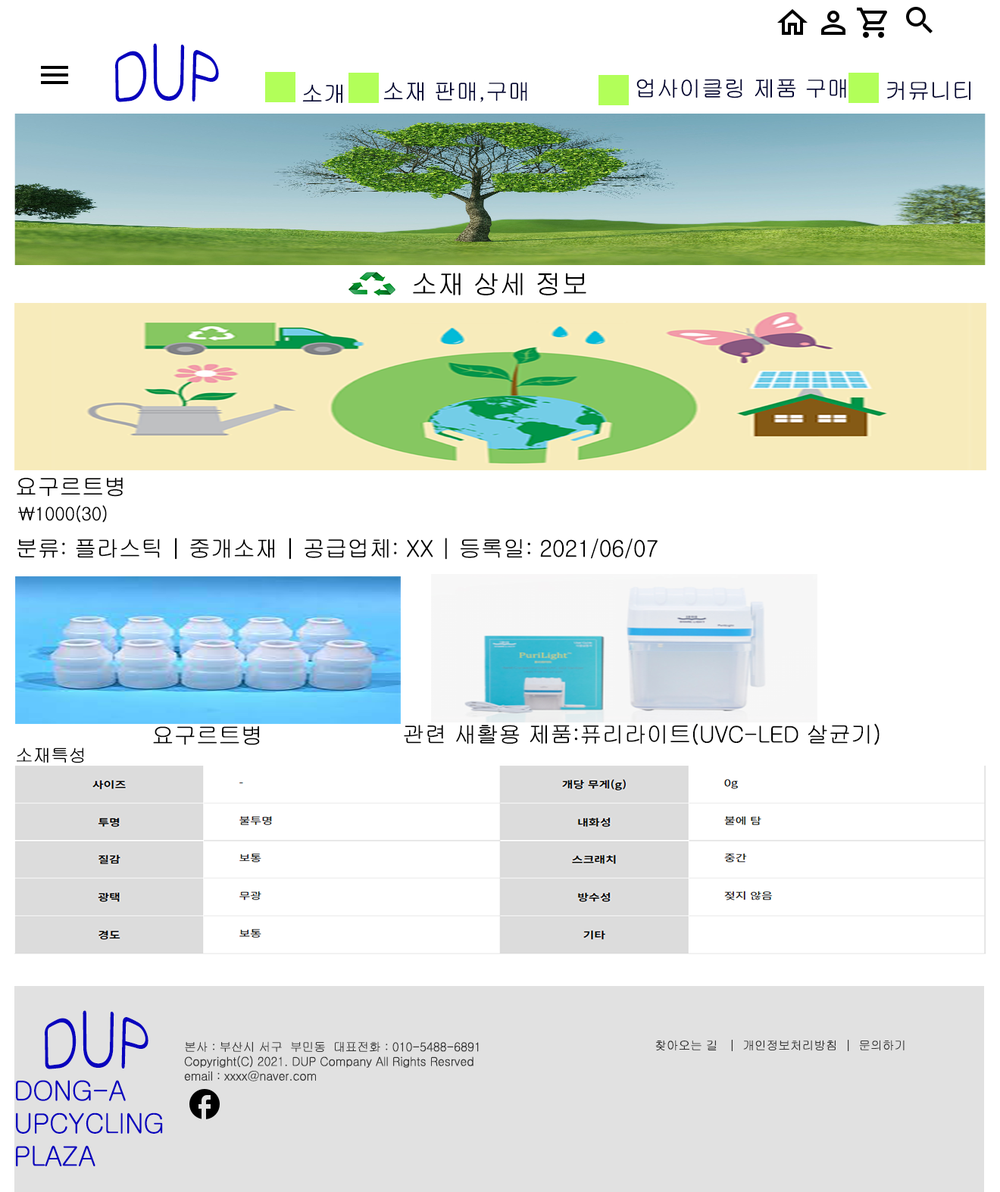
<style>
.page{position:relative;width:1000px;height:1192px;background:#ffffff}
.page>*{position:absolute;margin:0}
.t1{font:54.5px "Gulim";letter-spacing:-0.02em;color:#0802bd}
.t2{font:22.7px "Gulim";letter-spacing:-0.02em;color:#000333}
.t3{font:27.3px "Gulim";letter-spacing:-0.02em;color:#000000}
.t4{font:22.7px "Gulim";letter-spacing:-0.02em;color:#000000}
.t5{font:18.2px "Gulim";letter-spacing:-0.02em;color:#000000}
.t6{font:12.1px "Gulim";letter-spacing:-0.02em;color:#333333}
.t7{font:27.3px "Gulim";letter-spacing:-0.02em;color:#0802bd}
</style>
<div class="page">
<p class="t1" style="left:115px;top:43px;width:104px;height:59px">DUP</p>
<p class="t2" style="left:302px;top:84px;width:40px;height:19px">소개</p>
<p class="t2" style="left:383px;top:82px;width:144px;height:20px">소재 판매,구매</p>
<p class="t2" style="left:636px;top:79px;width:210px;height:19px">업사이클링 제품 구매</p>
<p class="t2" style="left:886px;top:81px;width:84px;height:19px">커뮤니티</p>
<p class="t3" style="left:413px;top:273px;width:173px;height:22px">소재 상세 정보</p>
<p class="t4" style="left:17px;top:477px;width:106px;height:20px">요구르트병</p>
<p class="t5" style="left:18px;top:505px;width:89px;height:18px">\1000(30)</p>
<p class="t4" style="left:17px;top:538px;width:641px;height:22px">분류: 플라스틱 | 중개소재 | 공급업체: XX | 등록일: 2021/06/07</p>
<p class="t4" style="left:153px;top:726px;width:107px;height:19px">요구르트병</p>
<p class="t4" style="left:404px;top:723px;width:476px;height:22px">관련 새활용 제품:퓨리라이트(UVC-LED 살균기)</p>
<p class="t5" style="left:17px;top:748px;width:67px;height:16px">소재특성</p>
<p class="t1" style="left:45px;top:1011px;width:103px;height:59px">DUP</p>
<p class="t6" style="left:184px;top:1042px;width:295px;height:40px">본사 : 부산시 서구  부민동  대표전화 : 010-5488-6891<br>Copyright(C) 2021. DUP Company All Rights Resrved <br>email : xxxx@naver.com</p>
<p class="t6" style="left:655px;top:1040px;width:250px;height:12px">찾아오는 길   |  개인정보처리방침  |  문의하기</p>
<p class="t7" style="left:16px;top:1080px;width:147px;height:87px">DONG-A<br>UPCYCLING<br>PLAZA</p>
</div>
